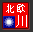
<style>
.page{position:relative;width:33px;height:32px;background:#f20000}
.page>*{position:absolute;margin:0}
.t1{font:10.4px "SimSun";color:#ffffff}
.t2{font:11.7px "SimSun";color:#ffffff}
</style>
<div class="page">
<p class="t1" style="left:6px;top:4px;width:19px;height:9px">北欧</p>
<p class="t2" style="left:16px;top:15px;width:11px;height:12px">川</p>
</div>
